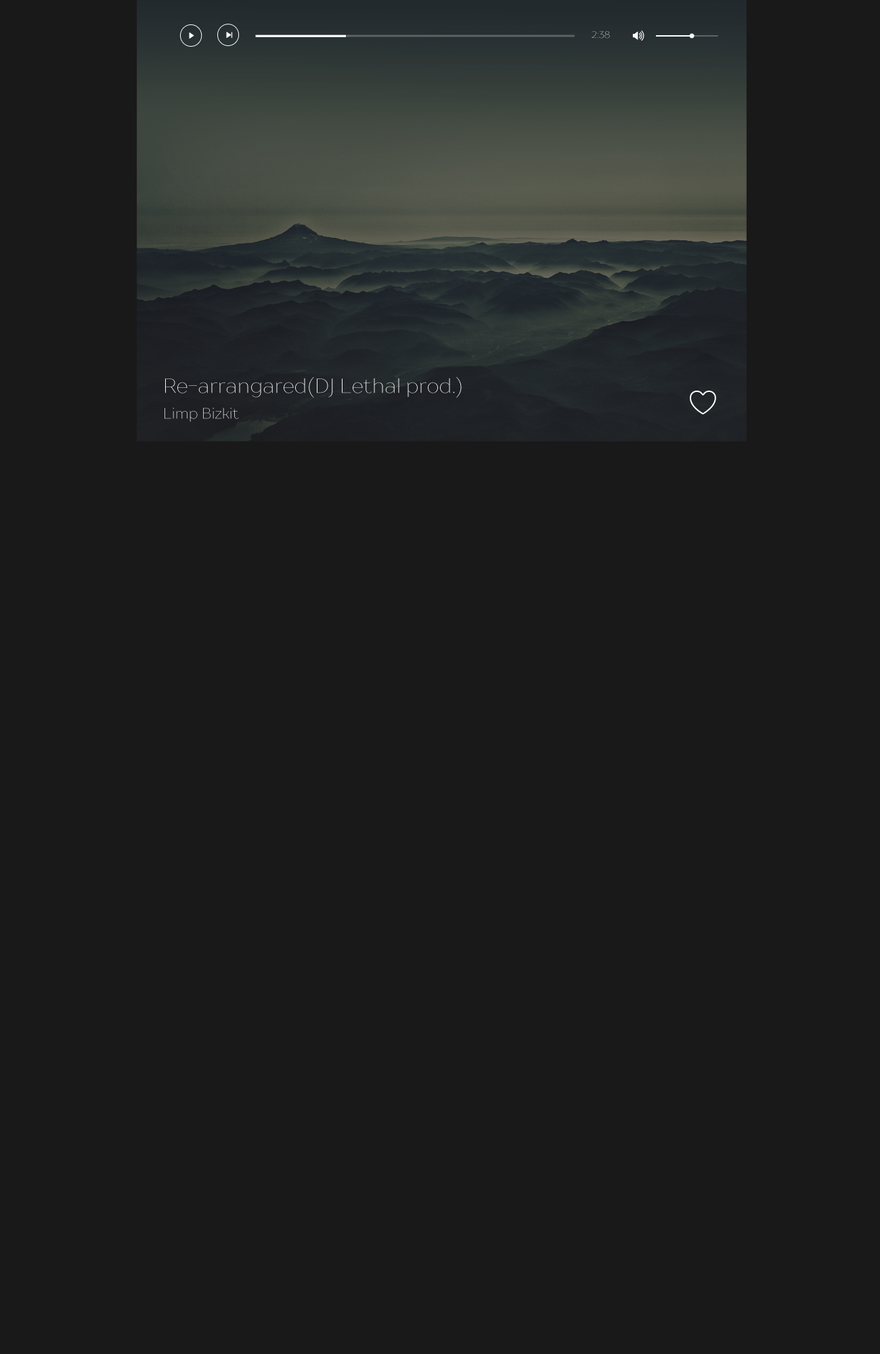
<style>
.page{position:relative;width:880px;height:1354px;background:#191919}
.page>*{position:absolute;margin:0}
.t1{font:9.5px "Drugs"}
.t2{font:20.3px "Drugs";color:#f5f5f5}
.t3{font:14.9px "Drugs"}
</style>
<div class="page">
<p class="t1" style="left:592px;top:31px;width:18px;height:8px">2:38</p>
<p class="t2" style="left:165px;top:377px;width:297px;height:21px">Re-arrangared(DJ Lethal prod.)</p>
<p class="t3" style="left:165px;top:408px;width:74px;height:14px">Limp Bizkit</p>
</div>
